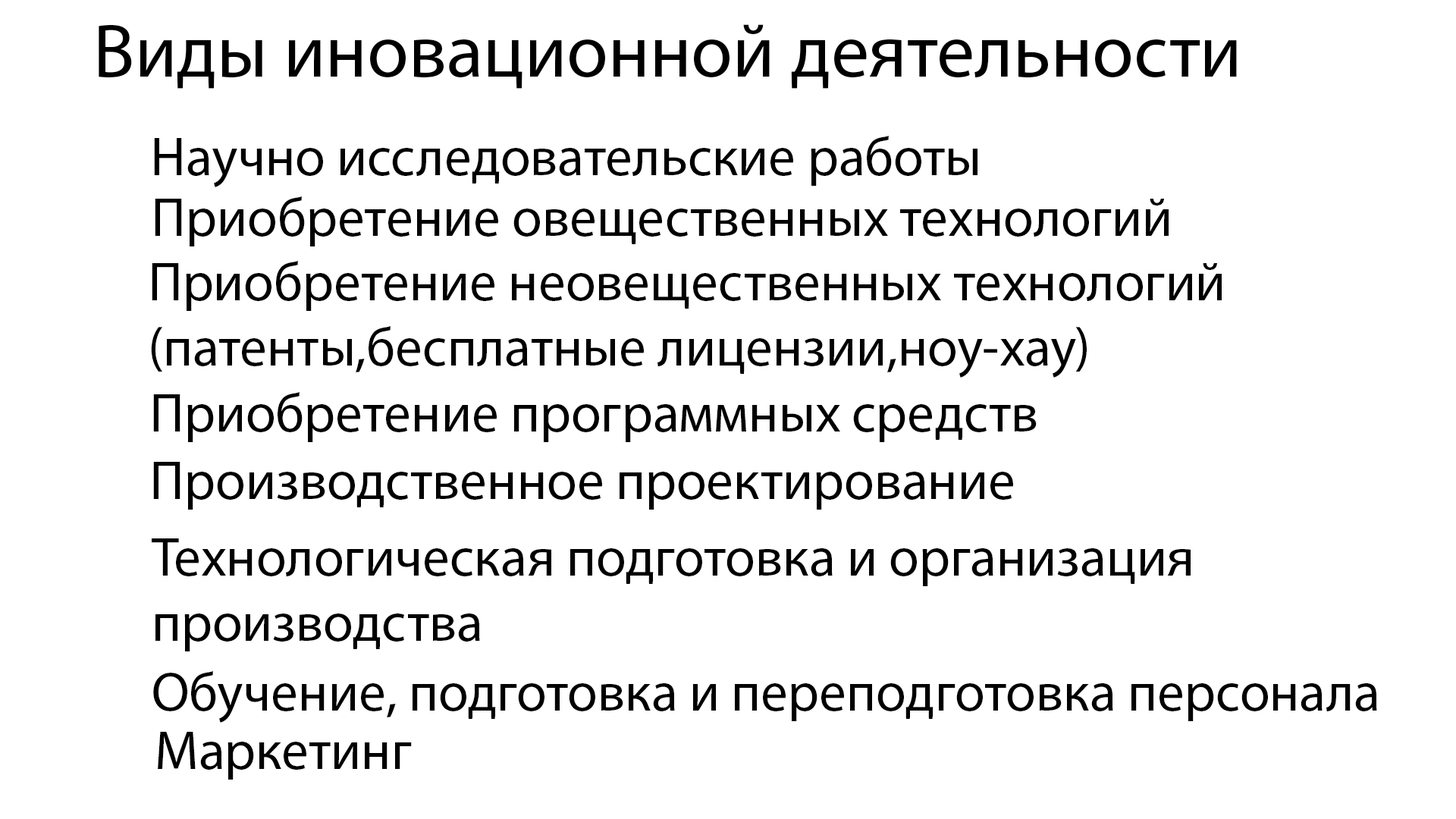
<style>
.page{position:relative;width:1456px;height:819px;background:#ffffff}
.page>*{position:absolute;margin:0}
.t1{font:75.8px "MyriadPro-Regular";color:#000000}
.t2{font:54.6px "MyriadPro-Regular";color:#000000}
</style>
<div class="page">
<p class="t1" style="left:99px;top:24px;width:1138px;height:65px">Виды иновационной деятельности</p>
<p class="t2" style="left:154px;top:136px;width:823px;height:51px">Научно исследовательские работы</p>
<p class="t2" style="left:155px;top:196px;width:1014px;height:50px">Приобретение овещественных технологий</p>
<p class="t2" style="left:151px;top:261px;width:1071px;height:117px">Приобретение неовещественных технологий<br>(патенты,бесплатные лицензии,ноу-хау)</p>
<p class="t2" style="left:153px;top:392px;width:884px;height:50px">Приобретение программных средств</p>
<p class="t2" style="left:153px;top:462px;width:860px;height:48px">Производственное проектирование</p>
<p class="t2" style="left:152px;top:538px;width:1039px;height:113px">Технологическая подготовка и организация <br>производства</p>
<p class="t2" style="left:153px;top:671px;width:1224px;height:52px">Обучение, подготовка и переподготовка персонала</p>
<p class="t2" style="left:158px;top:732px;width:254px;height:48px">Маркетинг</p>
</div>
